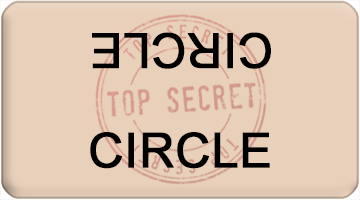
<style>
.page{position:relative;width:360px;height:200px;background:#e8d0bb}
.page>*{position:absolute;margin:0}
.t1{font:48px "ArialMT";color:#000000;font-weight:bold}
</style>
<div class="page">
<p class="t1" style="left:92px;top:32px;width:179px;height:37px;rotate:180deg">CIRCLE</p>
<p class="t1" style="left:90px;top:132px;width:180px;height:37px">CIRCLE</p>
</div>
